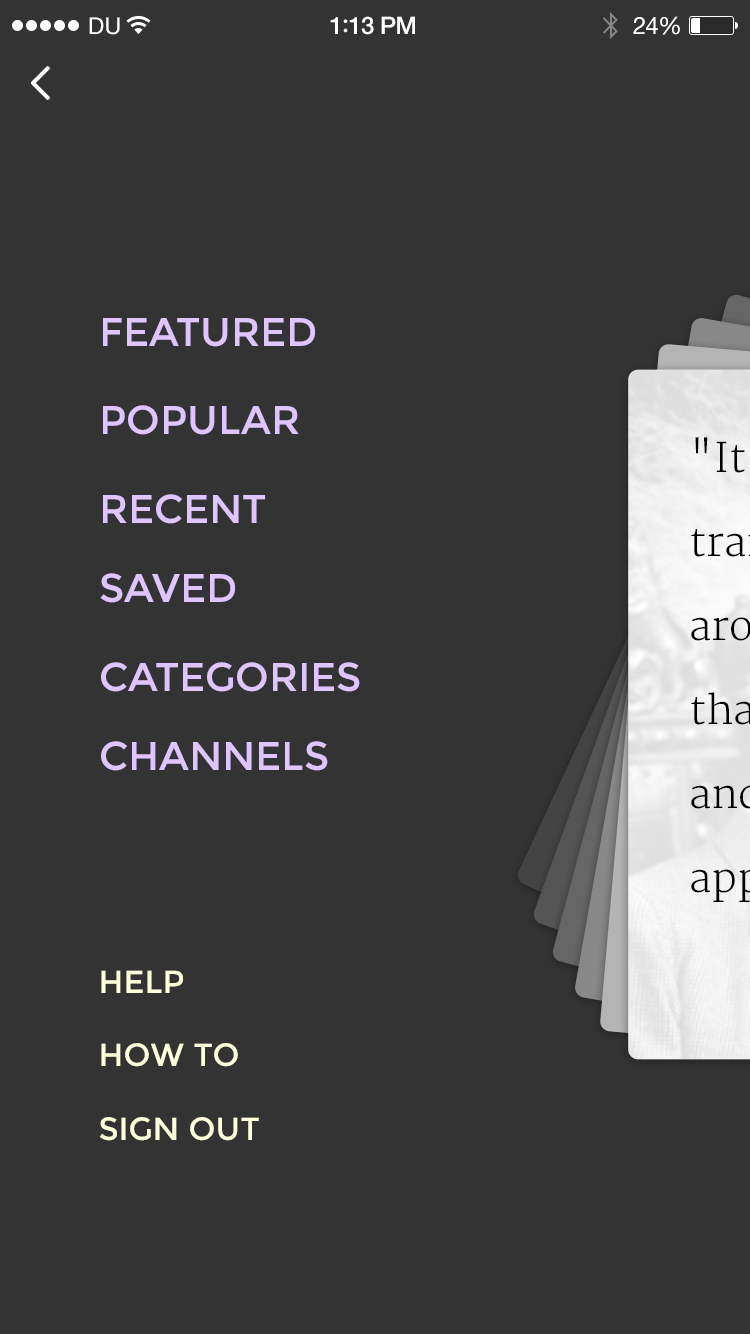
<style>
.page{position:relative;width:750px;height:1334px;background:#333333}
.page>*{position:absolute;margin:0}
.t1{font:23px "HelveticaNeue";letter-spacing:0.02em;color:#ffffff}
.t2{font:24px "HelveticaNeue-Medium";letter-spacing:-0.02em;color:#ffffff}
.t3{font:26px "Avenir-Medium";letter-spacing:-0.02em;color:#ffffff}
.t4{font:24px "HelveticaNeue";letter-spacing:-0.02em;color:#ffffff}
.t5{font:40px "Montserrat-Regular";color:#dec5ff;text-transform:uppercase}
.t6{font:32px "Montserrat-Regular";color:#fffedd;text-transform:uppercase}
</style>
<div class="page">
<p class="t1" style="left:89px;top:17px;width:31px;height:18px">DU</p>
<p class="t2" style="left:330px;top:16px;width:85px;height:19px">1<span class="t3">:</span>13 PM</p>
<p class="t4" style="left:633px;top:16px;width:47px;height:19px">24%</p>
<p class="t5" style="left:103px;top:318px;width:212px;height:29px">Featured</p>
<p class="t5" style="left:103px;top:405px;width:196px;height:30px">popular</p>
<p class="t5" style="left:103px;top:494px;width:162px;height:30px">Recent</p>
<p class="t5" style="left:100px;top:573px;width:135px;height:30px">saved</p>
<p class="t5" style="left:101px;top:662px;width:259px;height:30px">CAtegories</p>
<p class="t5" style="left:101px;top:741px;width:227px;height:30px">Channels</p>
<p class="t6" style="left:101px;top:970px;width:82px;height:23px">Help</p>
<p class="t6" style="left:101px;top:1043px;width:137px;height:24px">how to</p>
<p class="t6" style="left:99px;top:1117px;width:160px;height:24px">Sign out</p>
</div>
